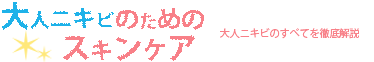
<style>
.page{position:relative;width:374px;height:62px;background:#ffffff}
.page>*{position:absolute;margin:0}
.t1{font:23px "KozGoPr6N-Bold";color:#1eb2e9}
.t2{font:30px "KozGoPr6N-Bold";color:#1eb2e9}
.t3{font:19.5px "KozGoPr6N-Bold";color:#1eb2e9}
.t4{font:18px "KozGoPr6N-Bold";color:#1eb2e9}
.t5{font:24px "KozGoPr6N-Bold";color:#f88088}
.t6{font:18px "KozGoPr6N-Bold";color:#f88088}
.t7{font:10px "KozGoPr6N-Regular";color:#f88088}
.t8{font:29.8px "KozGoPr6N-Bold";color:#f88088}
.t9{font:22.3px "KozGoPr6N-Bold";color:#f88088}
.t10{font:24.8px "KozGoPr6N-Bold";color:#f88088}
</style>
<div class="page">
<p class="t1" style="left:1px;top:1px;width:113px;height:29px"><span class="t2">大</span><span class="t3">人</span>ニキ<span class="t4">ビ</span></p>
<p class="t5" style="left:116px;top:8px;width:88px;height:22px">の<span class="t6">た</span>めの</p>
<p class="t7" style="left:220px;top:28px;width:139px;height:11px">大人ニキビのすべてを徹底解説</p>
<p class="t8" style="left:63px;top:35px;width:132px;height:26px">ス<span class="t9">キ</span>ン<span class="t10">ケ</span>ア</p>
</div>
